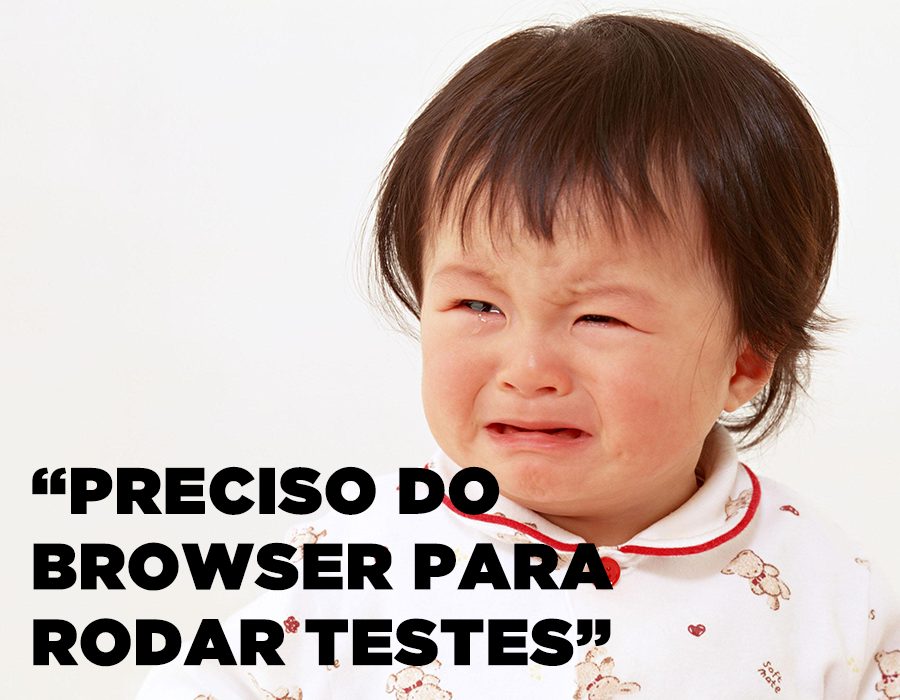
<style>
.page{position:relative;width:900px;height:700px}
.page>*{position:absolute;margin:0}
.t1{font:65px/75.7px "GothamUltra";color:#000000;font-weight:bold}
</style>
<div class="page">
<p class="t1" style="left:32px;top:466px;width:582px;height:201px">“PRECISO DO<br>BROWSER PARA<br>RODAR TESTES”</p>
</div>
